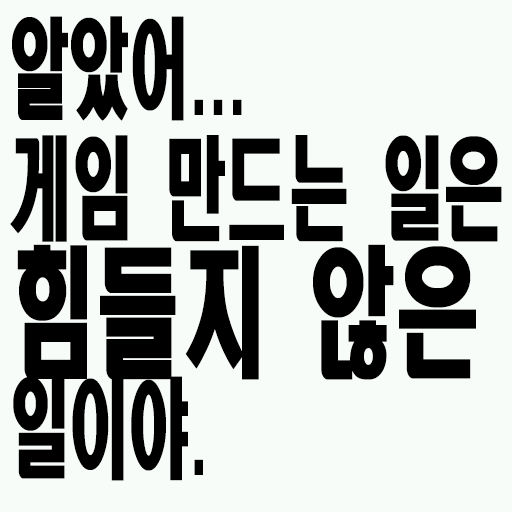
<style>
.page{position:relative;width:512px;height:512px;background:#f8fcf8}
.page>*{position:absolute;margin:0}
.t1{font:111.6px/120px "HeadlineR-HM";color:#000000;scale:0.56 1}
.t2{font:108px/120px "HeadlineR-HM";color:#000000;scale:0.56 1}
.t3{font:140.4px/120px "HeadlineR-HM";color:#000000;scale:0.61 1}
</style>
<div class="page">
<p class="t1" style="left:10px;top:16px;width:492px;height:465px"><span class="t2">알았어...<br></span>게임 만드는 일은<br><span class="t3">힘들지 않은<br></span><span class="t2">일이야.</span></p>
</div>
